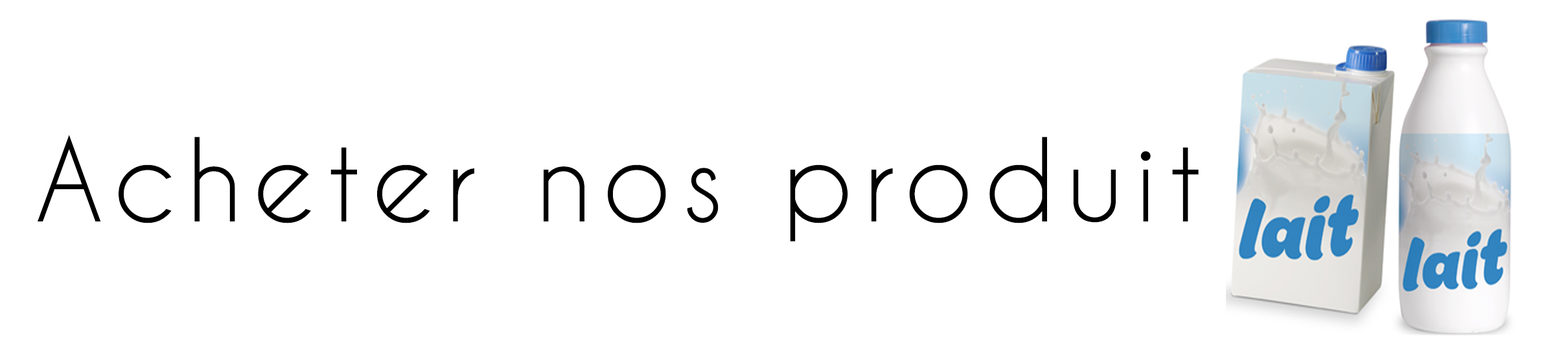
<style>
.page{position:relative;width:1568px;height:349px;background:#ffffff}
.page>*{position:absolute;margin:0}
.t1{font:108px "CaviarDreams";letter-spacing:0.1em;color:#000000}
</style>
<div class="page">
<p class="t1" style="left:38px;top:135px;width:1161px;height:107px">Acheter nos produit</p>
</div>
